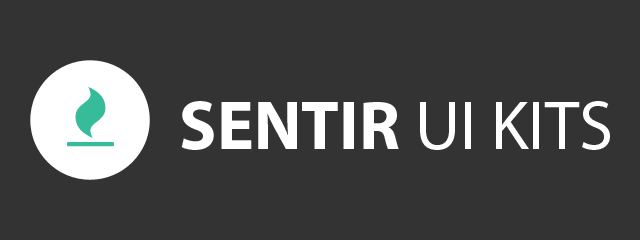
<style>
.page{position:relative;width:640px;height:240px;background:#333333}
.page>*{position:absolute;margin:0}
.t1{font:69.4px "MyriadPro-Regular";color:#ffffff}
.t2{font:69.4px "MyriadPro-Bold";color:#ffffff}
</style>
<div class="page">
<p class="t1" style="left:181px;top:101px;width:429px;height:49px"><span class="t2">SENTIR </span>UI KITS</p>
</div>
